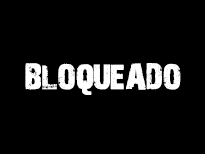
<style>
.page{position:relative;width:205px;height:154px;background:#000000}
.page>*{position:absolute;margin:0}
.t1{font:34px "28DaysLater";letter-spacing:-0.012em;color:#ffffff}
</style>
<div class="page">
<p class="t1" style="left:25px;top:63px;width:156px;height:32px">BLOQUEADO</p>
</div>
